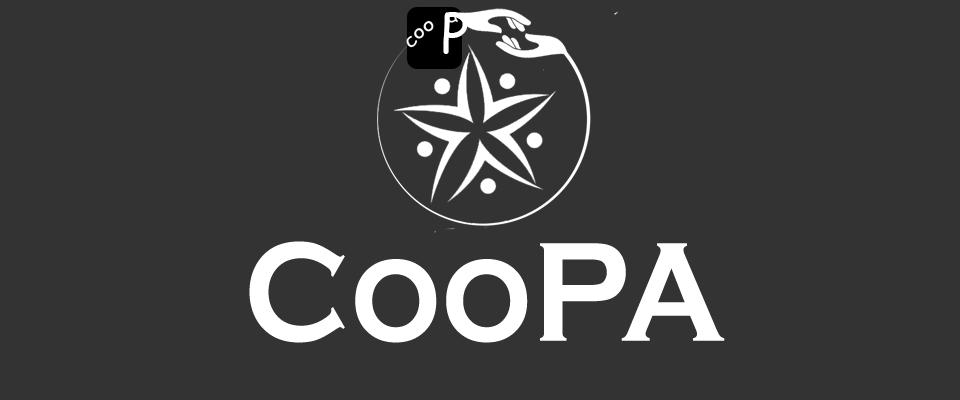
<style>
.page{position:relative;width:960px;height:400px;background:#333333}
.page>*{position:absolute;margin:0}
.t1{font:54px "ComicSansMS";color:#ffffff}
.t2{font:146px "CopperplateGothic-Bold";letter-spacing:0.01em;color:#ffffff;scale:0.86 1}
</style>
<div class="page">
<p class="t1" style="left:443px;top:12px;width:25px;height:42px">P</p>
<p class="t2" style="left:249px;top:241px;width:476px;height:102px">CooPA</p>
</div>
